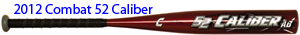
<style>
.page{position:relative;width:300px;height:35px;background:#ffffff}
.page>*{position:absolute;margin:0}
.t1{font:14px "MyriadPro-Regular";color:#0000ff}
</style>
<div class="page">
<p class="t1" style="left:14px;top:4px;width:139px;height:10px">2012 Combat 52 Caliber</p>
</div>
